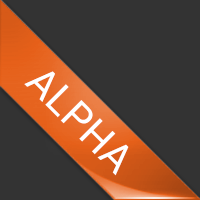
<style>
.page{position:relative;width:200px;height:200px;background:#333333}
.page>*{position:absolute;margin:0}
.t1{font:40.7px "Roboto-Regular";color:#ffffff}
</style>
<div class="page">
<p class="t1" style="left:24px;top:71px;width:105px;height:105px;rotate:45deg">ALPHA</p>
</div>
